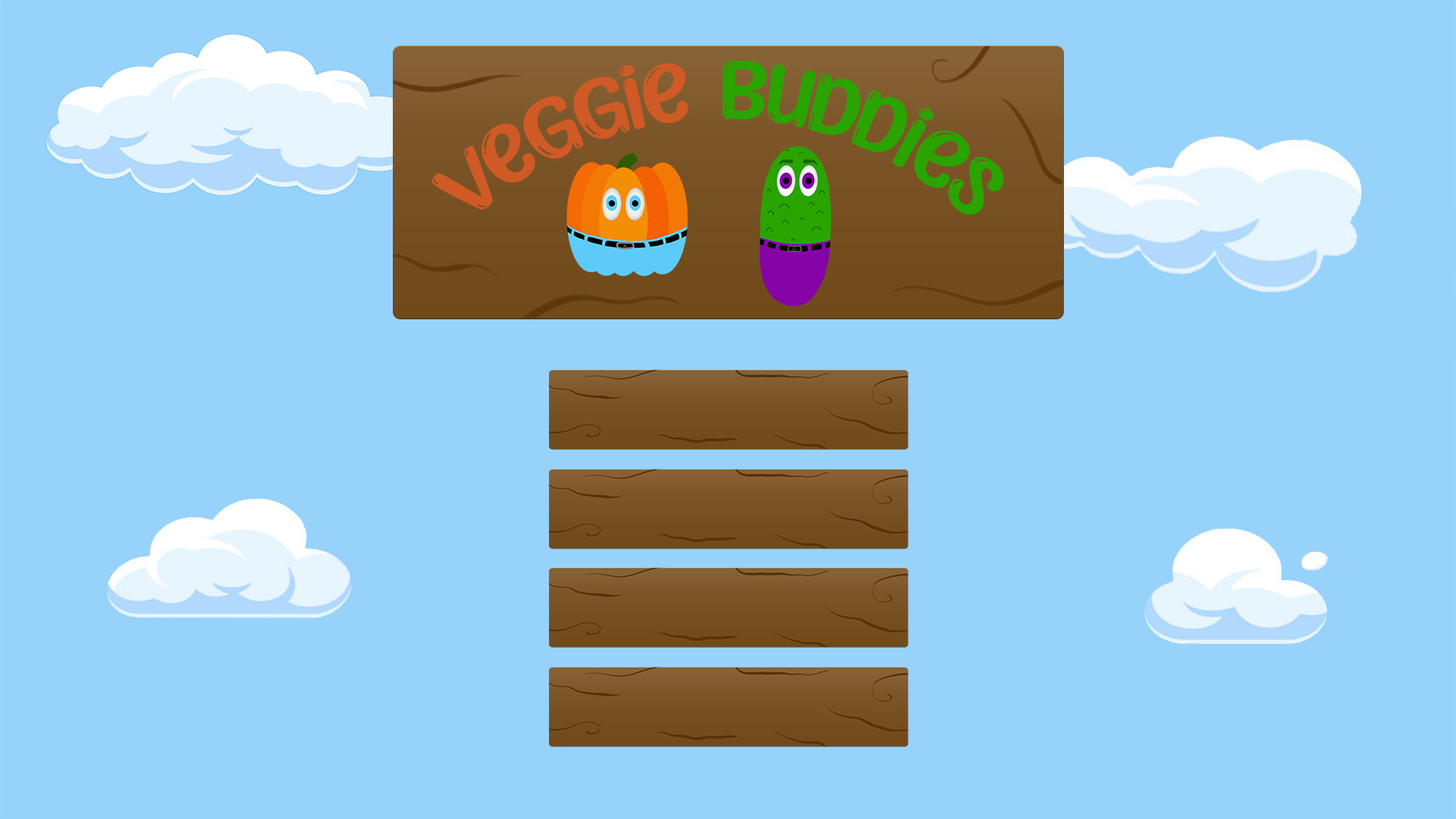
<style>
.page{position:relative;width:1456px;height:819px;background:#97d2fb}
.page>*{position:absolute;margin:0}
.t1{font:94.8px "SunnySpells-Regular";color:#29a400}
.t2{font:94.8px "SunnySpells-Regular";color:#cf5a26}
</style>
<div class="page">
<p class="t1" style="left:431px;top:61px;width:573px;height:154px"><span class="t2">Veggie </span>buddies</p>
</div>
